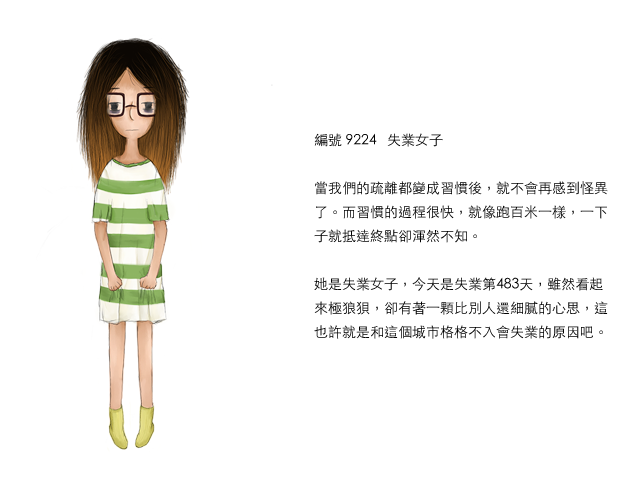
<style>
.page{position:relative;width:640px;height:480px;background:#ffffff}
.page>*{position:absolute;margin:0}
.t1{font:14px/24px "STHeitiTC-Light";color:#000000}
</style>
<div class="page">
<p class="t1" style="left:314px;top:133px;width:294px;height:206px">編號 9224   失業女子<br><br>當我們的疏離都變成習慣後，就不會再感到怪異了。而習慣的過程很快，就像跑百米一樣，一下子就抵達終點卻渾然不知。<br><br>她是失業女子，今天是失業第483天，雖然看起來極狼狽，卻有著一顆比別人還細膩的心思，這也許就是和這個城市格格不入會失業的原因吧。</p>
</div>
